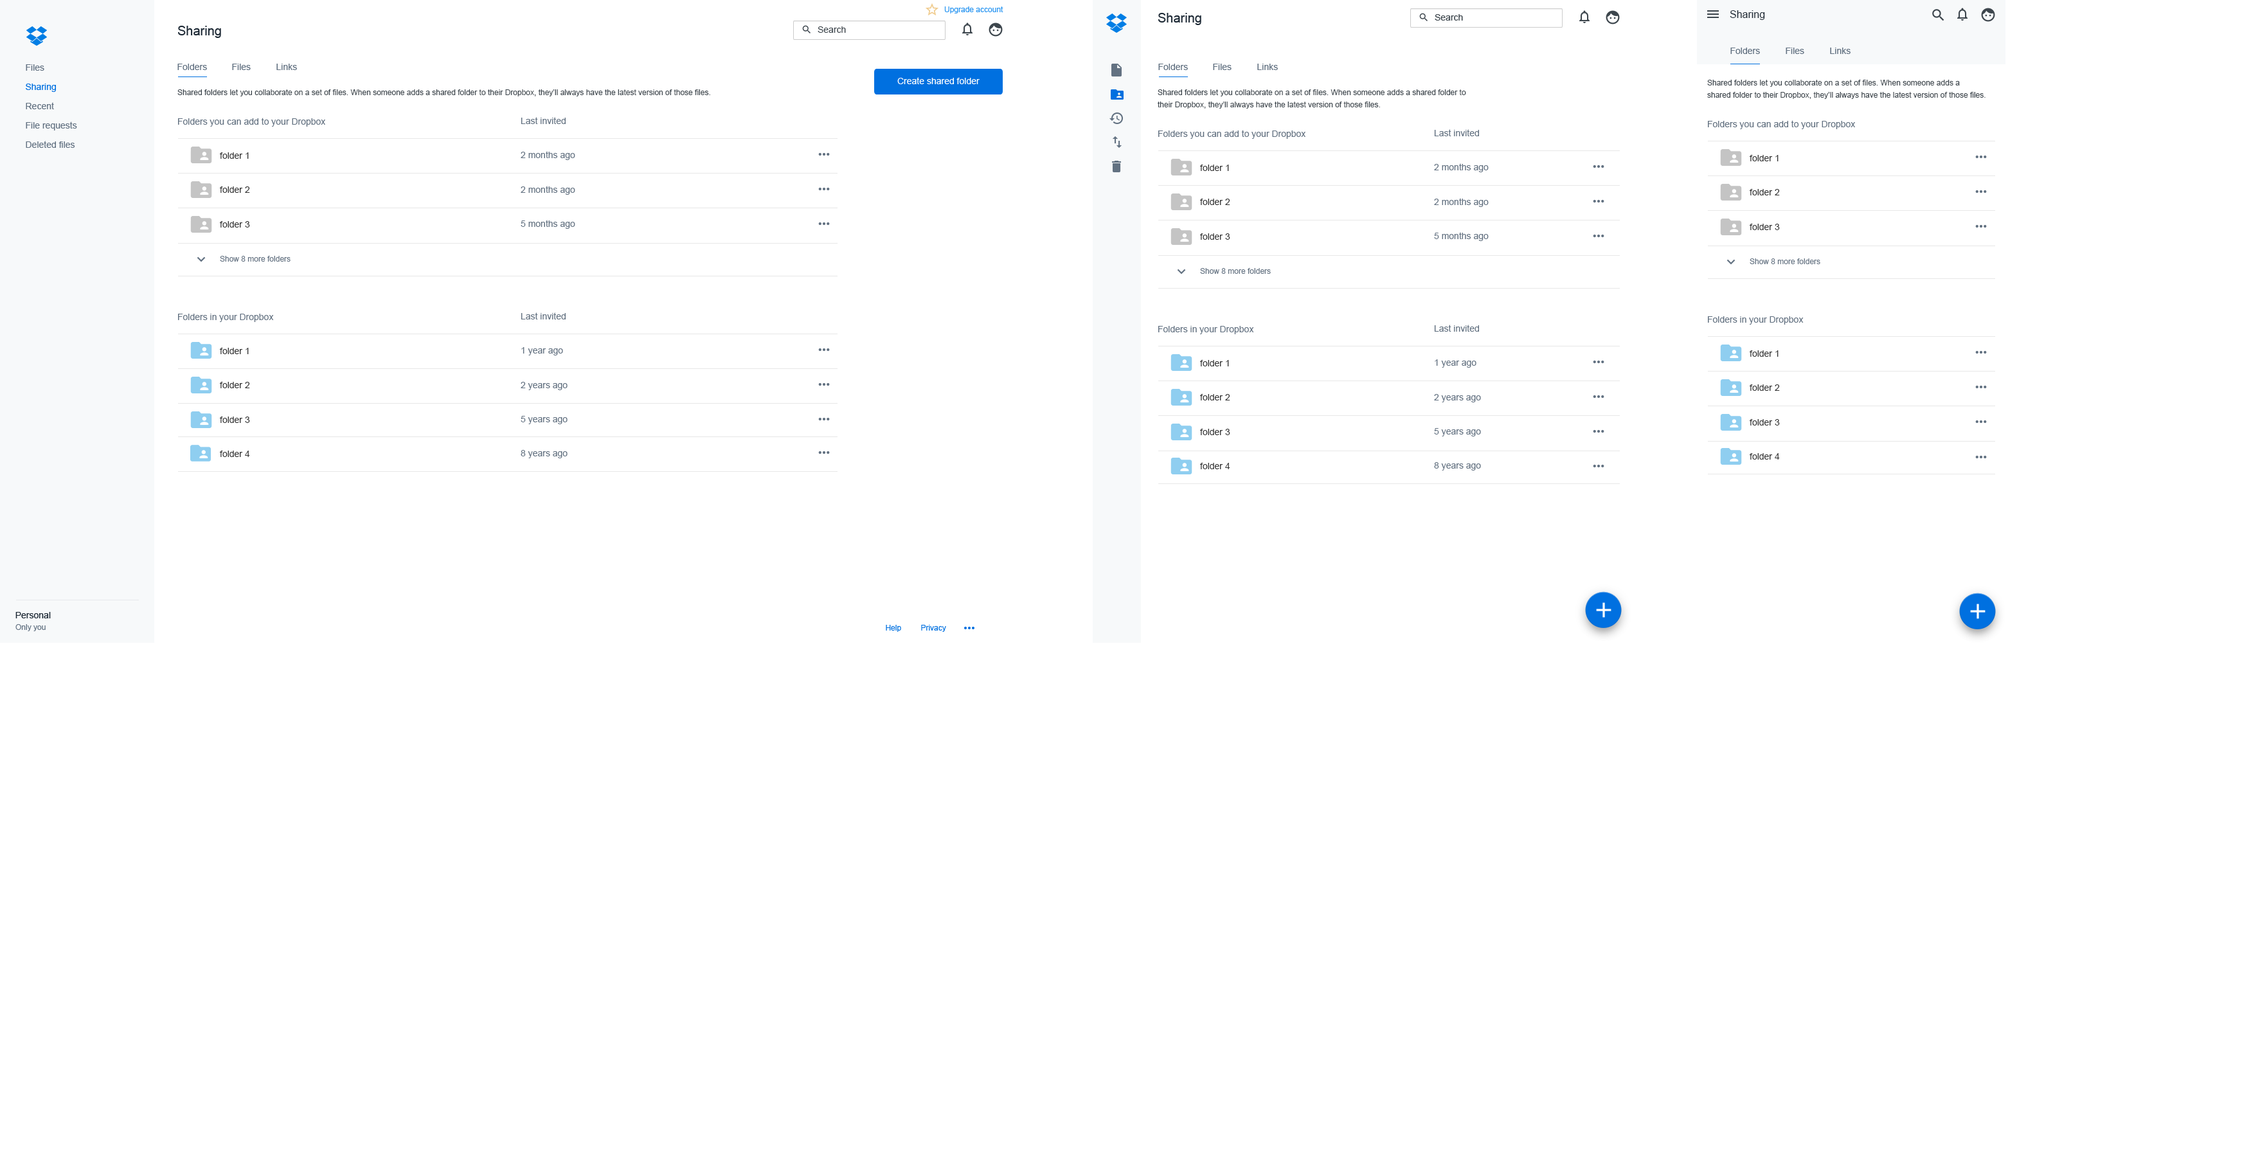
<style>
.page{position:relative;width:2242px;height:1157px;background:#ffffff}
.page>*{position:absolute;margin:0}
.t1{font:10.3px "ArialMT";color:#1b2733}
.t2{font:7.7px "ArialMT";color:#3d464d}
.t3{font:7.7px/12.2px "ArialMT";color:#3d464d}
.t4{font:9px "ArialMT";color:#637282}
.t5{font:9px/34.3px "ArialMT";color:#637282}
.t6{font:9px/34.7px "ArialMT";color:#637282}
.t7{font:9px/34.3px "ArialMT";color:#333333}
.t8{font:7.7px/34.3px "ArialMT";color:#637282}
</style>
<div class="page">
<p class="t1" style="left:1730px;top:10px;width:35px;height:10px">Sharing</p>
<p class="t2" style="left:177px;top:89px;width:533px;height:7px">Shared folders let you collaborate on a set of files. When someone adds a shared folder to their Dropbox, they’ll always have the latest version of those files.</p>
<p class="t3" style="left:1158px;top:89px;width:308px;height:20px">Shared folders let you collaborate on a set of files. When someone adds a shared folder to <br>their Dropbox, they’ll always have the latest version of those files.</p>
<p class="t3" style="left:1707px;top:80px;width:279px;height:19px">Shared folders let you collaborate on a set of files. When someone adds a <br>shared folder to their Dropbox, they’ll always have the latest version of those files.</p>
<p class="t4" style="left:178px;top:118px;width:147px;height:9px">Folders you can add to your Dropbox</p>
<p class="t5" style="left:521px;top:117px;width:54px;height:112px"><span class="t6">Last invited<br></span>2 months ago<br>2 months ago<br>5 months ago</p>
<p class="t4" style="left:1708px;top:120px;width:147px;height:9px">Folders you can add to your Dropbox</p>
<p class="t4" style="left:1158px;top:130px;width:148px;height:9px">Folders you can add to your Dropbox</p>
<p class="t5" style="left:1434px;top:129px;width:55px;height:112px"><span class="t6">Last invited<br></span>2 months ago<br>2 months ago<br>5 months ago</p>
<p class="t7" style="left:220px;top:152px;width:71px;height:110px">folder 1<br>folder 2<br>folder 3<br><span class="t8">Show 8 more folders</span></p>
<p class="t7" style="left:1750px;top:155px;width:71px;height:109px">folder 1<br>folder 2<br>folder 3<br><span class="t8">Show 8 more folders</span></p>
<p class="t7" style="left:1200px;top:165px;width:71px;height:109px">folder 1<br>folder 2<br>folder 3<br><span class="t8">Show 8 more folders</span></p>
<p class="t4" style="left:178px;top:314px;width:96px;height:8px">Folders in your Dropbox</p>
<p class="t5" style="left:521px;top:312px;width:47px;height:146px"><span class="t6">Last invited<br></span>1 year ago<br>2 years ago <br>5 years ago<br>8 years ago</p>
<p class="t4" style="left:1708px;top:316px;width:96px;height:9px">Folders in your Dropbox</p>
<p class="t4" style="left:1158px;top:326px;width:96px;height:8px">Folders in your Dropbox</p>
<p class="t5" style="left:1434px;top:325px;width:47px;height:146px"><span class="t6">Last invited<br></span>1 year ago<br>2 years ago <br>5 years ago<br>8 years ago</p>
<p class="t7" style="left:220px;top:348px;width:30px;height:109px">folder 1<br>folder 2<br>folder 3<br>folder 4</p>
<p class="t7" style="left:1750px;top:350px;width:30px;height:110px">folder 1<br>folder 2<br>folder 3<br>folder 4</p>
<p class="t7" style="left:1200px;top:360px;width:30px;height:109px">folder 1<br>folder 2<br>folder 3<br>folder 4</p>
</div>
